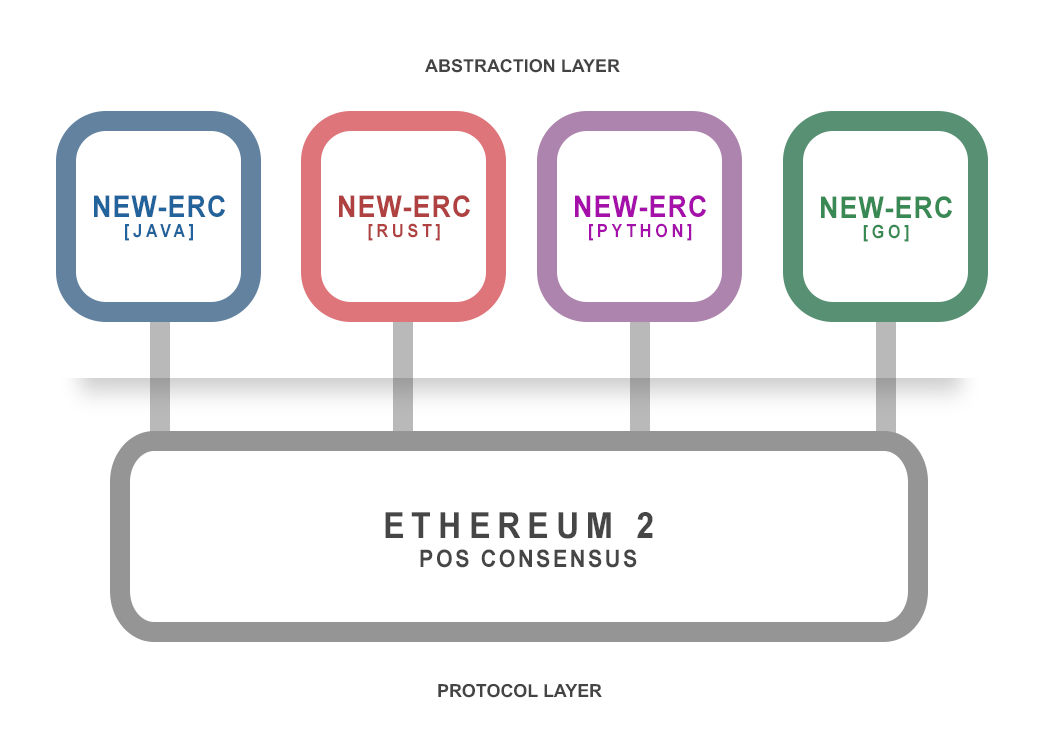
<style>
.page{position:relative;width:1044px;height:754px;background:#ffffff}
.page>*{position:absolute;margin:0}
.t1{font:17.8px "Arial-BoldMT";color:#444444}
.t2{font:30px/19.6px "Arial-BoldMT";letter-spacing:0.04em;color:#23639b;scale:0.89 1}
.t3{font:18px/19.6px "Arial-BoldMT";letter-spacing:0.24em;color:#23639b;scale:0.89 1}
.t4{font:30px/19.6px "Arial-BoldMT";letter-spacing:0.04em;color:#af4141;scale:0.89 1}
.t5{font:18px/19.6px "Arial-BoldMT";letter-spacing:0.24em;color:#af4141;scale:0.89 1}
.t6{font:18px/19.6px "Arial-BoldMT";letter-spacing:0.24em;color:#a610aa;scale:0.89 1}
.t7{font:30px/19.6px "Arial-BoldMT";letter-spacing:0.04em;color:#a610aa;scale:0.89 1}
.t8{font:30px/19.6px "Arial-BoldMT";letter-spacing:0.04em;color:#388953;scale:0.89 1}
.t9{font:18px/19.6px "Arial-BoldMT";letter-spacing:0.24em;color:#388953;scale:0.89 1}
.t10{font:24px/29.4px "Arial-BoldMT";letter-spacing:0.12em;color:#464646;scale:0.89 1}
.t11{font:36px/29.4px "Arial-BoldMT";letter-spacing:0.22em;color:#464646;scale:0.89 1}
.t12{font:17.9px "Arial-BoldMT";color:#444444}
</style>
<div class="page">
<p class="t1" style="left:425px;top:59px;width:195px;height:14px">ABSTRACTION LAYER</p>
<p class="t2" style="left:94px;top:195px;width:131px;height:46px;text-align:center">NEW-ERC<br><span class="t3">[JAVA]</span></p>
<p class="t4" style="left:339px;top:195px;width:131px;height:46px;text-align:center">NEW-ERC<br><span class="t5">[RUST]</span></p>
<p class="t6" style="left:575px;top:195px;width:131px;height:46px;text-align:center"><span class="t7">NEW-ERC<br></span>[PYTHON]</p>
<p class="t8" style="left:821px;top:196px;width:131px;height:46px;text-align:center">NEW-ERC<br><span class="t9">[GO]</span></p>
<p class="t10" style="left:385px;top:512px;width:268px;height:56px;text-align:center"><span class="t11">ETHEREUM 2 <br></span>POS CONSENSUS</p>
<p class="t12" style="left:438px;top:684px;width:164px;height:14px">PROTOCOL LAYER</p>
</div>
